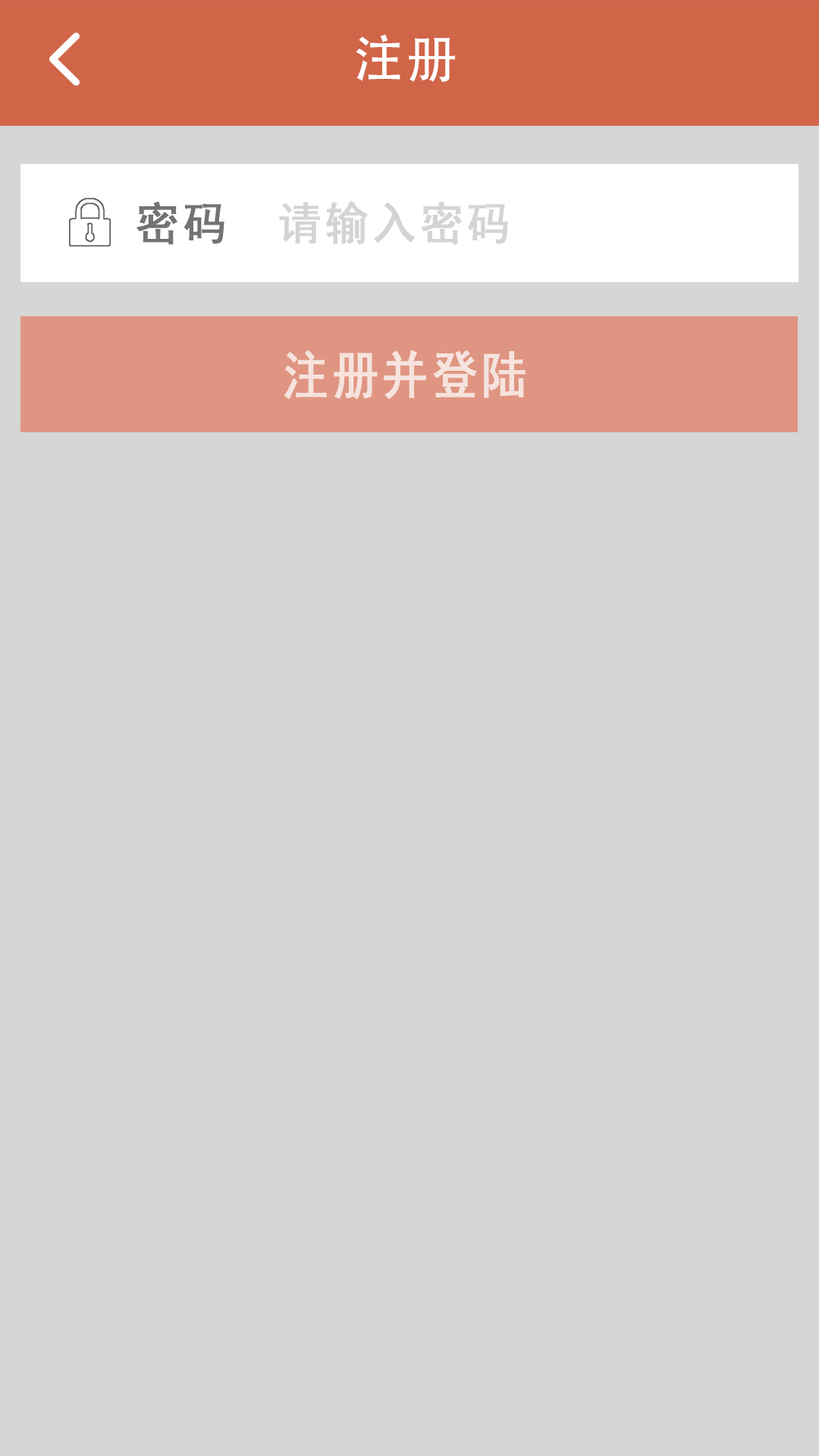
<style>
.page{position:relative;width:819px;height:1456px;background:#d6d6d6}
.page>*{position:absolute;margin:0}
.t1{font:50.8px "AdobeHeitiStd-Regular";letter-spacing:0.06em;color:#ffffff}
.t2{font:45.5px "SimHei";letter-spacing:0.06em;color:#737373;font-weight:bold;scale:0.95 1}
.t3{font:45.5px "SimHei";letter-spacing:0.06em;color:#d4d4d4;font-weight:bold;scale:0.95 1}
.t4{font:51.8px "SimHei";letter-spacing:0.06em;color:#f6e3de;font-weight:bold;scale:0.88 1}
</style>
<div class="page">
<p class="t1" style="left:356px;top:34px;width:99px;height:48px">注册</p>
<p class="t2" style="left:136px;top:202px;width:88px;height:43px">密码</p>
<p class="t3" style="left:279px;top:201px;width:229px;height:44px">请输入密码</p>
<p class="t4" style="left:284px;top:350px;width:242px;height:49px">注册并登陆</p>
</div>
